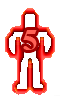
<style>
.page{position:relative;width:64px;height:96px;background:#ffffff}
.page>*{position:absolute;margin:0}
.t1{font:30px "TimesNewRomanPS-BoldMT";color:#ff6256}
</style>
<div class="page">
<p class="t1" style="left:23px;top:30px;width:14px;height:20px">5</p>
</div>
